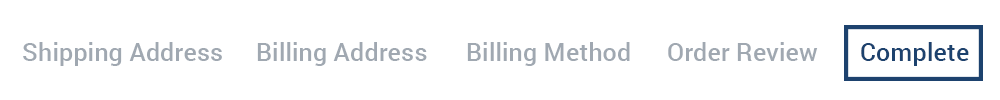
<style>
.page{position:relative;width:1000px;height:100px;background:#ffffff}
.page>*{position:absolute;margin:0}
.t1{font:25.4px "Roboto-Medium";color:#a0a8b1}
.t2{font:25.4px "Roboto-Medium";color:#1d426e}
</style>
<div class="page">
<p class="t1" style="left:23px;top:42px;width:199px;height:24px">Shipping Address</p>
<p class="t1" style="left:257px;top:42px;width:170px;height:24px">Billing Address</p>
<p class="t1" style="left:467px;top:42px;width:163px;height:24px">Billing Method</p>
<p class="t1" style="left:668px;top:42px;width:150px;height:19px">Order Review</p>
<p class="t2" style="left:861px;top:42px;width:108px;height:24px">Complete</p>
</div>
